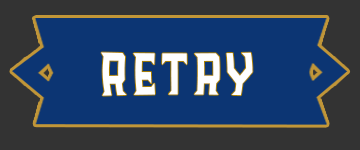
<style>
.page{position:relative;width:360px;height:150px;background:#0c3573}
.page>*{position:absolute;margin:0}
.t1{font:62.5px "Lorde-Havana";letter-spacing:0.1em;color:#ffffff;scale:0.75 1}
</style>
<div class="page">
<p class="t1" style="left:101px;top:52px;width:152px;height:44px">RETRY</p>
</div>
